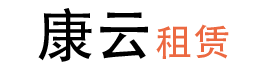
<style>
.page{position:relative;width:270px;height:70px;background:#ffffff}
.page>*{position:absolute;margin:0}
.t1{font:58.3px "AdobeHeitiStd-Regular";color:#000000}
.t2{font:37.5px "MyriadPro-Regular";color:#ec6941}
</style>
<div class="page">
<p class="t1" style="left:38px;top:8px;width:110px;height:54px">康云</p>
<p class="t2" style="left:156px;top:24px;width:73px;height:35px">租赁</p>
</div>
